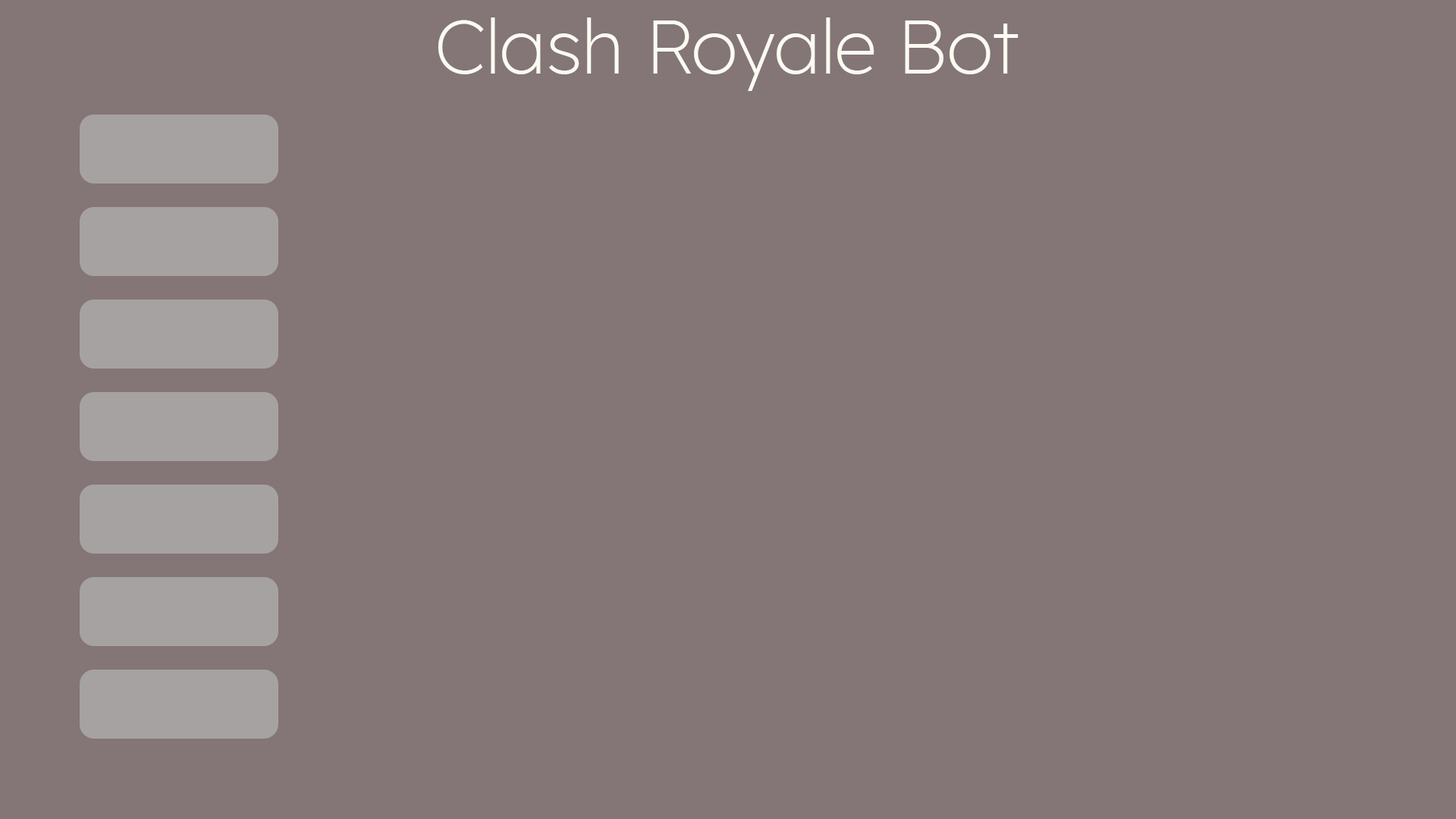
<style>
.page{position:relative;width:1456px;height:819px;background:#847577}
.page>*{position:absolute;margin:0}
.t1{font:75.8px "Lexend-Light";color:#fbfbf2}
</style>
<div class="page">
<p class="t1" style="left:438px;top:17px;width:580px;height:74px">Clash Royale Bot</p>
</div>
